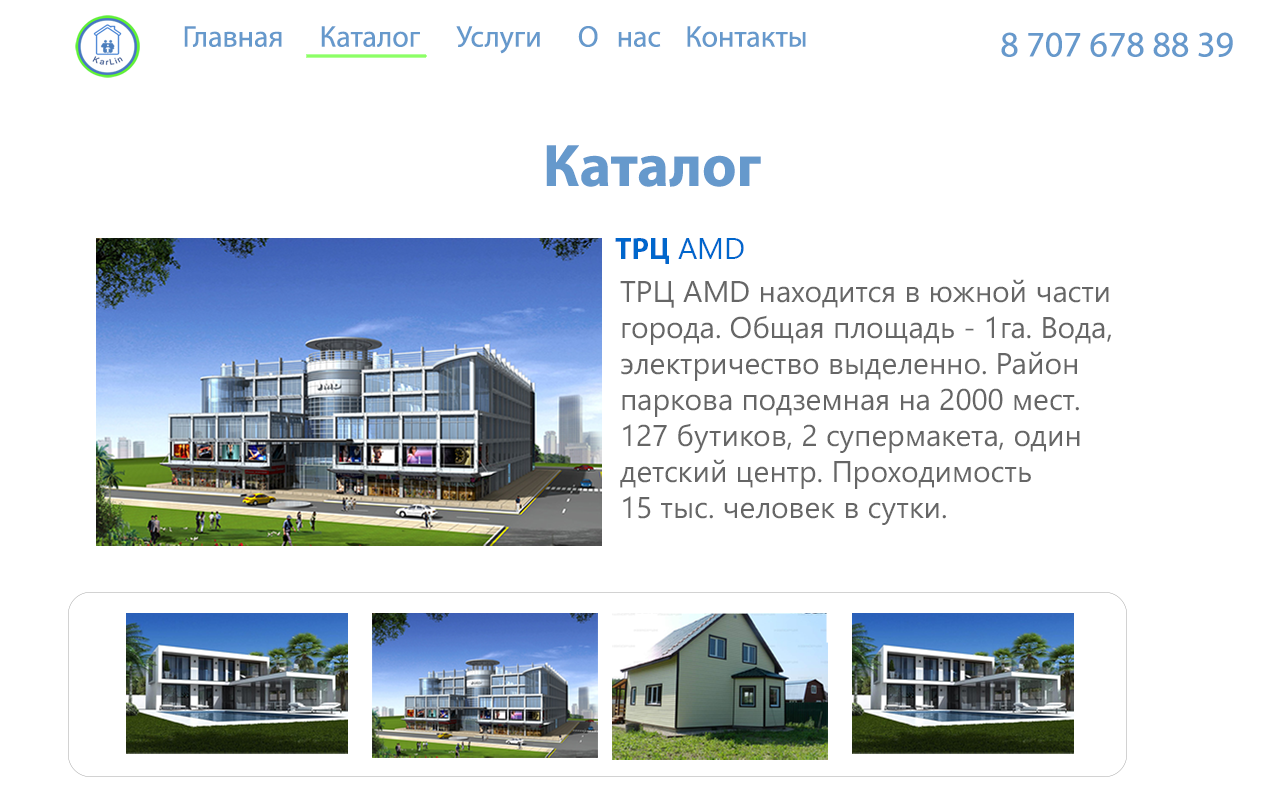
<style>
.page{position:relative;width:1280px;height:800px;background:#ffffff}
.page>*{position:absolute;margin:0}
.t1{font:30px "MyriadPro-Regular";color:#6699cc}
.t2{font:36px "MyriadPro-Regular";color:#6699cc}
.t3{font:60px "MyriadPro-Bold";color:#6699cc}
.t4{font:30px "MyriadPro-Bold";color:#0066cc}
.t5{font:30px "MyanmarText";color:#0066cc}
.t6{font:30px "SegoeUI";color:#666666}
</style>
<div class="page">
<p class="t1" style="left:184px;top:26px;width:622px;height:28px">Главная  Каталог  Услуги  О нас  Контакты</p>
<p class="t2" style="left:1001px;top:32px;width:232px;height:25px">8 707 678 88 39</p>
<p class="t3" style="left:546px;top:145px;width:215px;height:42px">Каталог</p>
<p class="t4" style="left:615px;top:238px;width:129px;height:26px">ТРЦ<span class="t5"> AMD</span></p>
<p class="t6" style="left:620px;top:279px;width:491px;height:246px">ТРЦ AMD находится в южной части <br>города. Общая площадь - 1га. Вода, <br>электричество выделенно. Район <br>паркова подземная на 2000 мест. <br>127 бутиков, 2 супермакета, один <br>детский центр. Проходимость <br>15 тыс. человек в сутки.</p>
</div>
